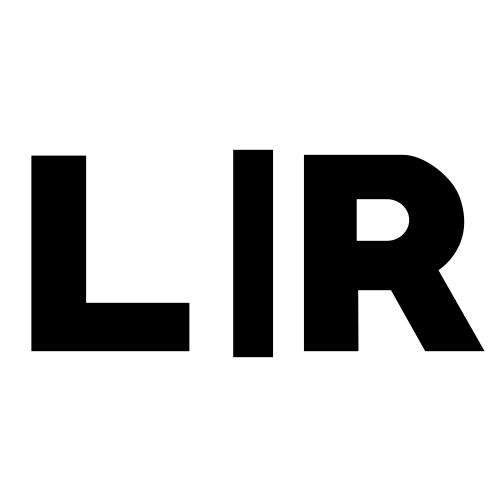
<style>
.page{position:relative;width:500px;height:500px;background:#ffffff}
.page>*{position:absolute;margin:0}
.t1{font:252.2px "PRIMETIME-Regular";color:#000000;font-weight:bold}
</style>
<div class="page">
<p class="t1" style="left:31px;top:149px;width:454px;height:209px">L|R</p>
</div>
